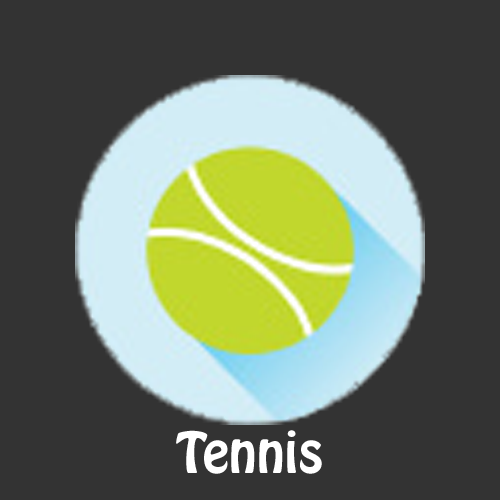
<style>
.page{position:relative;width:500px;height:500px;background:#333333}
.page>*{position:absolute;margin:0}
.t1{font:50px "HoboStd";color:#ffffff}
</style>
<div class="page">
<p class="t1" style="left:176px;top:430px;width:146px;height:44px">Tennis</p>
</div>
